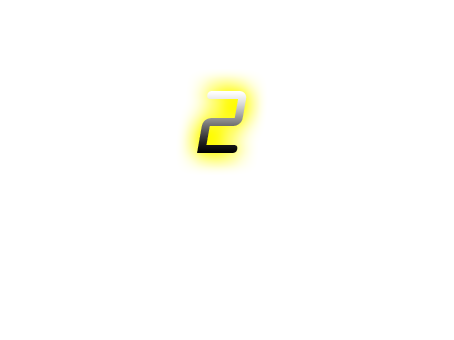
<style>
.page{position:relative;width:454px;height:340px;background:#ffffff}
.page>*{position:absolute;margin:0}
.t1{font:80px "OCRAStd";font-style:italic}
</style>
<div class="page">
<p class="t1" style="left:197px;top:91px;width:50px;height:62px">2</p>
</div>
